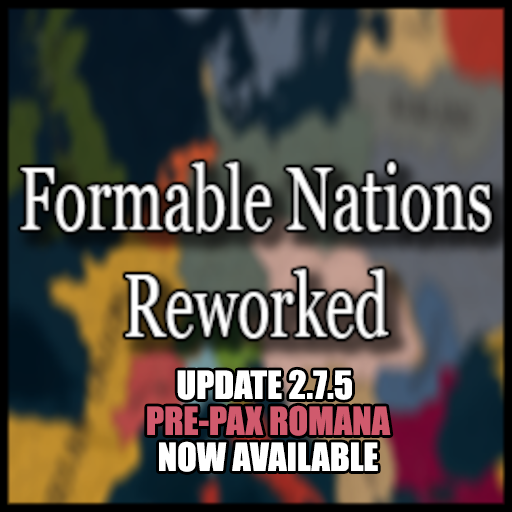
<style>
.page{position:relative;width:512px;height:512px}
.page>*{position:absolute;margin:0}
.t1{font:36px/36px "Impact";color:#d05a6d}
.t2{font:36px/36px "Impact";color:#ffffff}
</style>
<div class="page">
<p class="t1" style="left:147px;top:369px;width:244px;height:103px;text-align:center"><span class="t2">UPDATE 2.7.5 <br></span>PRE-PAX ROMANA<br><span class="t2">NOW AVAILABLE</span></p>
</div>
